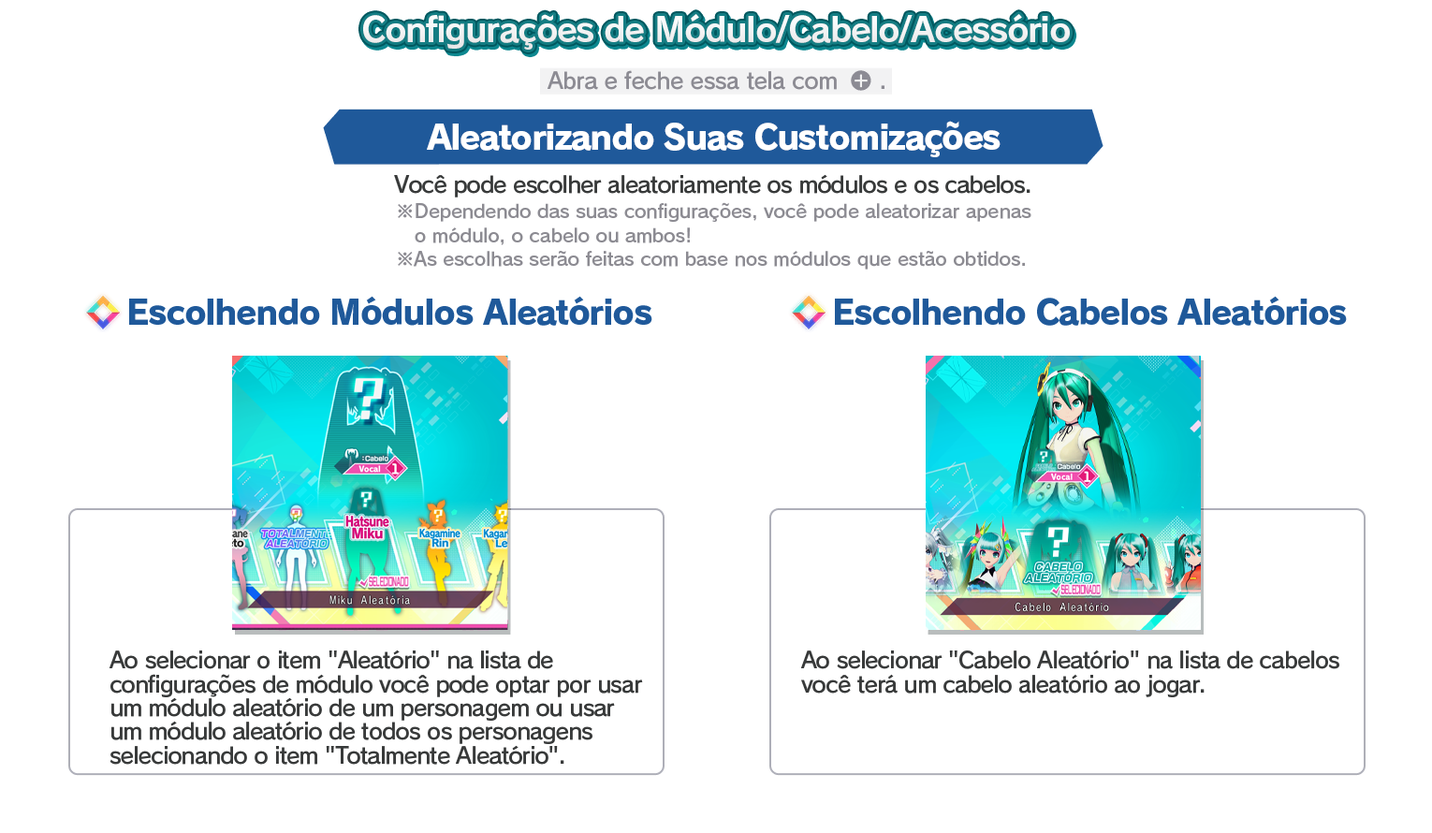
<style>
.page{position:relative;width:1432px;height:833px;background:#ffffff}
.page>*{position:absolute;margin:0}
.t1{font:33.7px "RodinPro-B";letter-spacing:-0.039em;color:#f2f2f3}
.t2{font:22.5px "RodinPro-DB";letter-spacing:-0.025em;color:#8c8b93}
.t3{font:33.7px "RodinPro-EB";letter-spacing:-0.048em;color:#ffffff}
.t4{font:22.5px "RodinPro-DB";letter-spacing:-0.04em;color:#383a3a}
.t5{font:18.7px/23.7px "RodinPro-DB";letter-spacing:-0.014em;color:#8c8b92}
.t6{font:33.7px "RodinPro-EB";letter-spacing:-0.04em;color:#1f599a}
.t7{font:22.5px/23.7px "RodinPro-DB";letter-spacing:-0.04em;color:#383a3a}
</style>
<div class="page">
<p class="t1" style="left:363px;top:14px;width:707px;height:36px">Configurações de Módulo/Cabelo/Acessório</p>
<p class="t2" style="left:547px;top:70px;width:290px;height:20px">Abra e feche essa tela com</p>
<p class="t2" style="left:881px;top:85px;width:3px;height:4px">.</p>
<p class="t3" style="left:427px;top:121px;width:573px;height:36px">Aleatorizando Suas Customizações</p>
<p class="t4" style="left:394px;top:174px;width:636px;height:23px">Você pode escolher aleatoriamente os módulos e os cabelos.</p>
<p class="t5" style="left:398px;top:202px;width:633px;height:68px">※Dependendo das suas configurações, você pode aleatorizar apenas<br>   o módulo, o cabelo ou ambos!<br>※As escolhas serão feitas com base nos módulos que estão obtidos.</p>
<p class="t6" style="left:129px;top:296px;width:523px;height:30px">Escolhendo Módulos Aleatórios</p>
<p class="t6" style="left:835px;top:296px;width:512px;height:30px">Escolhendo Cabelos Aleatórios</p>
<p class="t7" style="left:109px;top:649px;width:534px;height:116px">Ao selecionar o item "Aleatório" na lista de<br>configurações de módulo você pode optar por usar<br>um módulo aleatório de um personagem ou usar<br>um módulo aleatório de todos os personagens<br>selecionando o item "Totalmente Aleatório".</p>
<p class="t7" style="left:801px;top:649px;width:538px;height:48px">Ao selecionar "Cabelo Aleatório" na lista de cabelos<br>você terá um cabelo aleatório ao jogar.</p>
</div>
